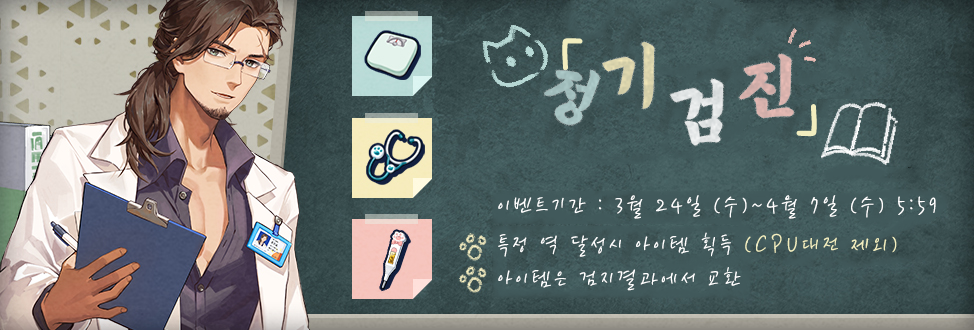
<style>
.page{position:relative;width:974px;height:330px}
.page>*{position:absolute;margin:0}
.t1{font:88px "THEFACESHOP";letter-spacing:0.14em;color:#f2eebf}
.t2{font:73px "Dokrip";letter-spacing:0.14em;color:#d9d3ab}
.t3{font:73px "Dokrip";letter-spacing:0.14em;color:#d8b2ad}
.t4{font:66px "Dokrip";letter-spacing:0.14em;color:#b9d7d5}
.t5{font:73px "Dokrip";letter-spacing:0.14em;color:#e2e5e6}
.t6{font:24px "THEFACESHOP";letter-spacing:0.14em;color:#ffffff}
.t7{font:24px "THEFACESHOP";letter-spacing:0.14em;color:#f2eebf}
</style>
<div class="page">
<p class="t1" style="left:562px;top:38px;width:21px;height:33px">「</p>
<p class="t2" style="left:602px;top:42px;width:53px;height:67px">기</p>
<p class="t3" style="left:739px;top:54px;width:55px;height:64px">진</p>
<p class="t4" style="left:544px;top:70px;width:56px;height:55px;rotate:19deg">정</p>
<p class="t5" style="left:670px;top:79px;width:54px;height:67px">검</p>
<p class="t1" style="left:796px;top:104px;width:21px;height:33px">」</p>
<p class="t6" style="left:498px;top:195px;width:438px;height:24px">이벤트기간 : 3월 24일 (수)~4월 7일 (수) 5:59</p>
<p class="t6" style="left:498px;top:232px;width:399px;height:25px">특정 역 달성시 아이템 획득 <span class="t7">(CPU대전 제외)</span></p>
<p class="t6" style="left:498px;top:267px;width:243px;height:24px">아이템은 검지결과에서 교환</p>
</div>
